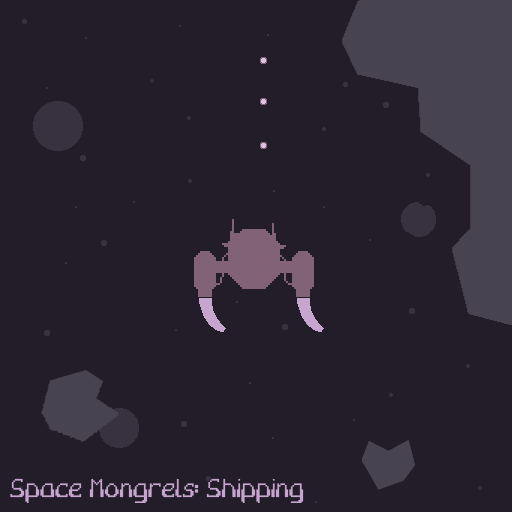
<style>
.page{position:relative;width:512px;height:512px;background:#231d29}
.page>*{position:absolute;margin:0}
.t1{font:24px "Socket";color:#c6a6cf}
</style>
<div class="page">
<p class="t1" style="left:10px;top:478px;width:294px;height:25px">Space Mongrels: Shipping</p>
</div>
